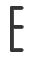
<style>
.page{position:relative;width:35px;height:60px;background:#ffffff}
.page>*{position:absolute;margin:0}
.t1{font:60px "Shket-Regular";letter-spacing:0.025em;color:#343434}
</style>
<div class="page">
<p class="t1" style="left:11px;top:7px;width:12px;height:44px">E</p>
</div>
